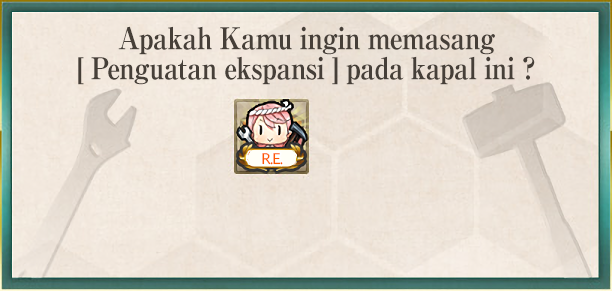
<style>
.page{position:relative;width:612px;height:291px}
.page>*{position:absolute;margin:0}
.t1{font:30px/30px "RyuminPro-ExBold";letter-spacing:-0.04em;color:#463f38;scale:0.9 1}
</style>
<div class="page">
<p class="t1" style="left:78px;top:26px;width:457px;height:59px;text-align:center">Apakah Kamu ingin memasang<br>[ Penguatan ekspansi ] pada kapal ini ?</p>
</div>
